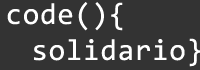
<style>
.page{position:relative;width:200px;height:70px;background:#333333}
.page>*{position:absolute;margin:0}
.t1{font:30px "Consolas";letter-spacing:0.025em;color:#ffffff}
</style>
<div class="page">
<p class="t1" style="left:7px;top:2px;width:194px;height:65px;text-align:center">code(){<br>      solidario}</p>
</div>
